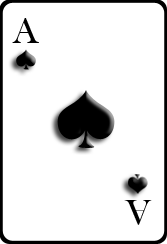
<style>
.page{position:relative;width:167px;height:244px;background:#ffffff}
.page>*{position:absolute;margin:0}
.t1{font:37px "BaskOldFace";color:#000000}
</style>
<div class="page">
<p class="t1" style="left:12px;top:18px;width:27px;height:25px">A</p>
<p class="t1" style="left:124px;top:200px;width:28px;height:25px;rotate:-180deg">A</p>
</div>
